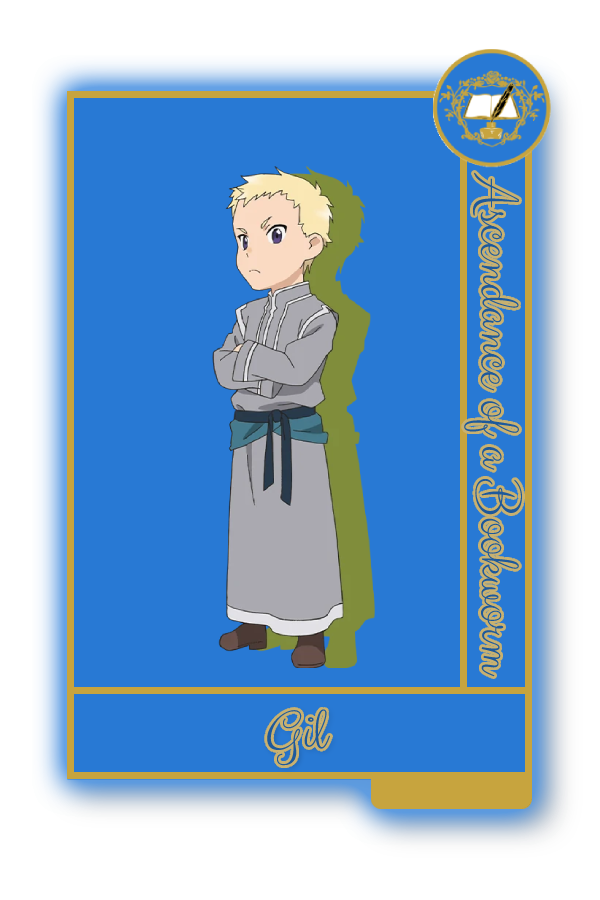
<style>
.page{position:relative;width:600px;height:900px;background:#2879d4}
.page>*{position:absolute;margin:0}
.t1{font:58px "ClickerScript-Regular";color:#1d599c}
.t2{font:60px "ClickerScript-Regular";color:#1d599c}
</style>
<div class="page">
<p class="t1" style="left:464px;top:172px;width:59px;height:505px;rotate:90deg">Ascendance of a Bookworm</p>
<p class="t2" style="left:267px;top:709px;width:64px;height:57px">Gil</p>
</div>
